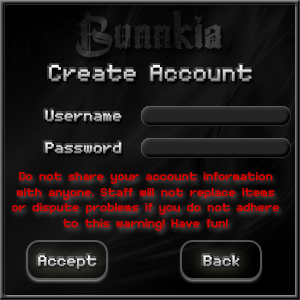
<style>
.page{position:relative;width:300px;height:300px}
.page>*{position:absolute;margin:0}
.t1{font:48px "TheCenturion";color:#202020;font-weight:bold}
.t2{font:36px "MinimalFont5x7";font-weight:bold}
.t3{font:24px "MinimalFont5x7";font-weight:bold}
.t4{font:18px "MinimalFont5x7";color:#d30000;font-weight:bold}
</style>
<div class="page">
<p class="t1" style="left:75px;top:10px;width:148px;height:49px">Bunnkia</p>
<p class="t2" style="left:49px;top:65px;width:203px;height:17px">Create Account</p>
<p class="t3" style="left:45px;top:110px;width:77px;height:12px">Username</p>
<p class="t3" style="left:45px;top:142px;width:77px;height:12px">Password</p>
<p class="t4" style="left:19px;top:172px;width:254px;height:12px">Do not share your account information</p>
<p class="t4" style="left:16px;top:188px;width:259px;height:12px">with anyone. Staff will not replace items</p>
<p class="t4" style="left:12px;top:203px;width:267px;height:12px">or dispute problems if you do not adhere</p>
<p class="t4" style="left:63px;top:219px;width:165px;height:12px">to this warning! Have fun!</p>
<p class="t3" style="left:38px;top:255px;width:59px;height:15px">Accept</p>
<p class="t3" style="left:203px;top:255px;width:37px;height:12px">Back</p>
</div>
